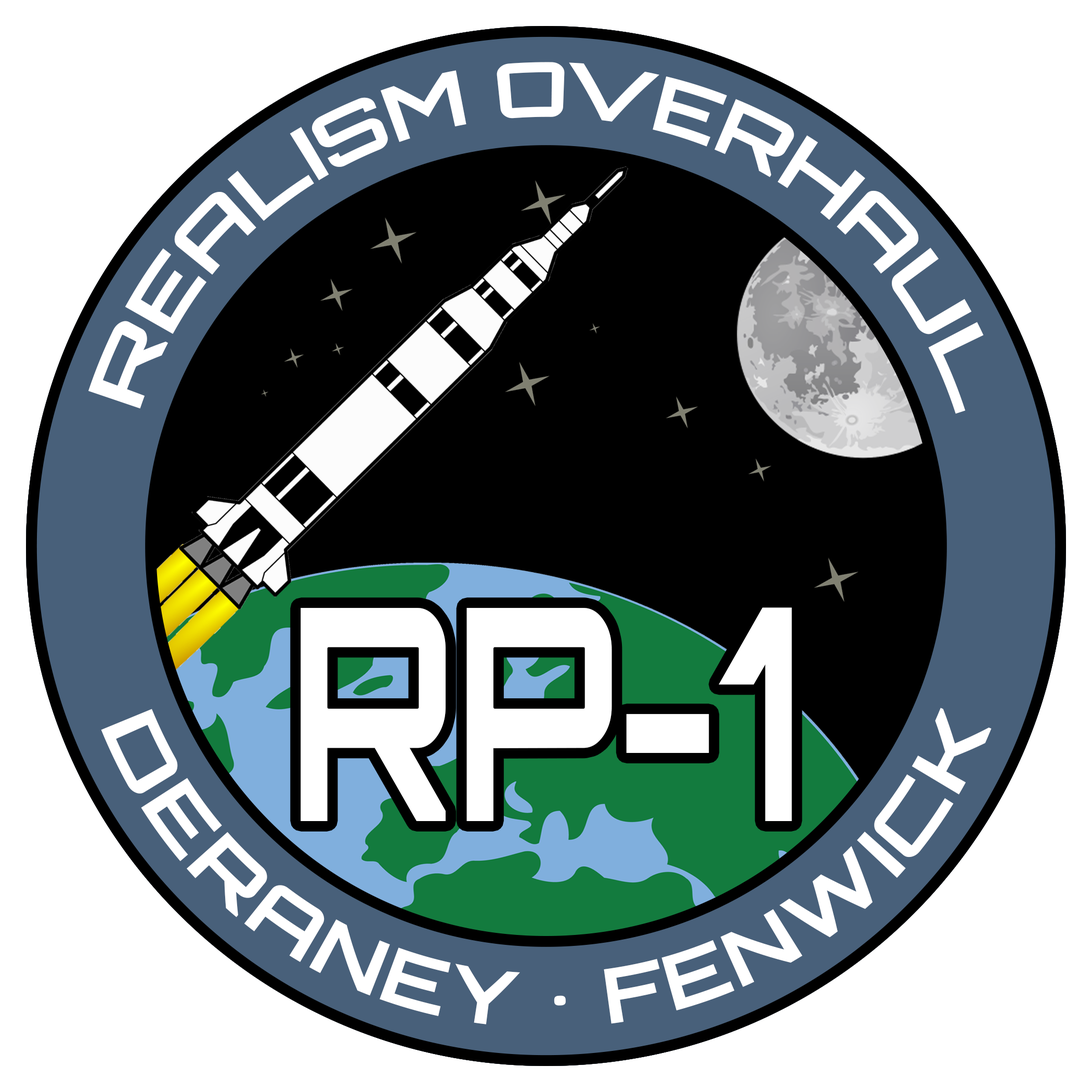
<style>
.page{position:relative;width:1092px;height:1092px;background:#ffffff}
.page>*{position:absolute;margin:0}
.t1{font:75.8px "Orbitron-Bold";color:#ffffff;scale:0.85 1}
.t2{font:296.4px "Orbitron-Bold";color:#ffffff;scale:0.68 1}
</style>
<div class="page">
<p class="t1" style="left:88px;top:62px;width:896px;height:352px;text-align:center">REALISM OVERHAUL</p>
<p class="t2" style="left:301px;top:607px;width:491px;height:214px">RP-1</p>
<p class="t1" style="left:101px;top:708px;width:891px;height:316px;text-align:center">DERANEY • FENWICK</p>
</div>
